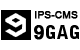
<style>
.page{position:relative;width:80px;height:50px;background:#ffffff}
.page>*{position:absolute;margin:0}
.t1{font:10px "ArialMT";color:#000000;font-weight:bold}
.t2{font:18px "BellGothicStd-Black";color:#000000}
.t3{font:19px "Mangal-Bold";color:#000000;font-weight:bold}
</style>
<div class="page">
<p class="t1" style="left:35px;top:11px;width:43px;height:8px">IPS-CMS</p>
<p class="t2" style="left:34px;top:25px;width:45px;height:15px"><span class="t3">9</span>GAG</p>
</div>
